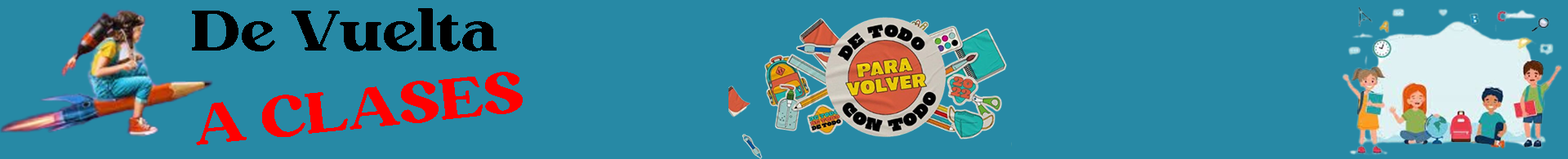
<style>
.page{position:relative;width:1568px;height:159px;background:#2789a5}
.page>*{position:absolute;margin:0}
.t1{font:57.2px "Megusto-Regular";color:#000000}
.t2{font:57.2px "Megusto-Regular";color:#ff0000}
</style>
<div class="page">
<p class="t1" style="left:192px;top:8px;width:305px;height:43px">De Vuelta</p>
<p class="t2" style="left:196px;top:72px;width:327px;height:73px;rotate:-6deg">A CLASES</p>
</div>
